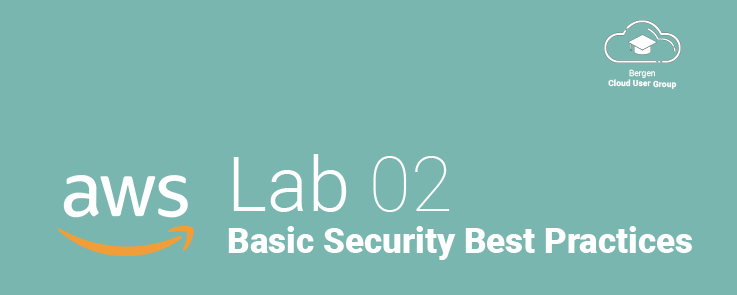
<style>
.page{position:relative;width:737px;height:295px;background:#78b6af}
.page>*{position:absolute;margin:0}
.t1{font:8.6px "Roboto-Bold";color:#ffffff}
.t2{font:8.6px "Roboto-Light";color:#ffffff}
.t3{font:35px "Roboto-Black";color:#ffffff}
.t4{font:76px "Roboto-Light";color:#ffffff}
.t5{font:76px "Roboto-Thin";color:#ffffff}
</style>
<div class="page">
<p class="t1" style="left:608px;top:69px;width:69px;height:20px;text-align:center"><span class="t2">Bergen<br></span>Cloud User Group</p>
<p class="t3" style="left:228px;top:154px;width:464px;height:106px"><span class="t4">Lab </span><span class="t5">02<br></span>Basic Security Best Practices</p>
</div>
